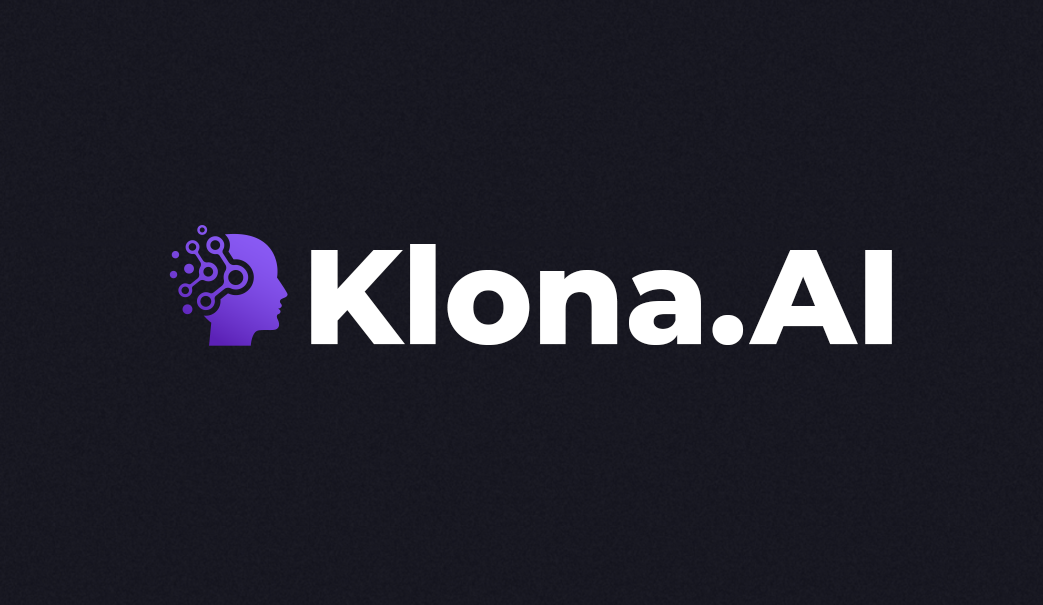
<style>
.page{position:relative;width:1043px;height:605px}
.page>*{position:absolute;margin:0}
.t1{font:133.4px "Montserrat-ExtraBold";color:#ffffff}
</style>
<div class="page">
<p class="t1" style="left:311px;top:244px;width:581px;height:101px">Klona.AI</p>
</div>
